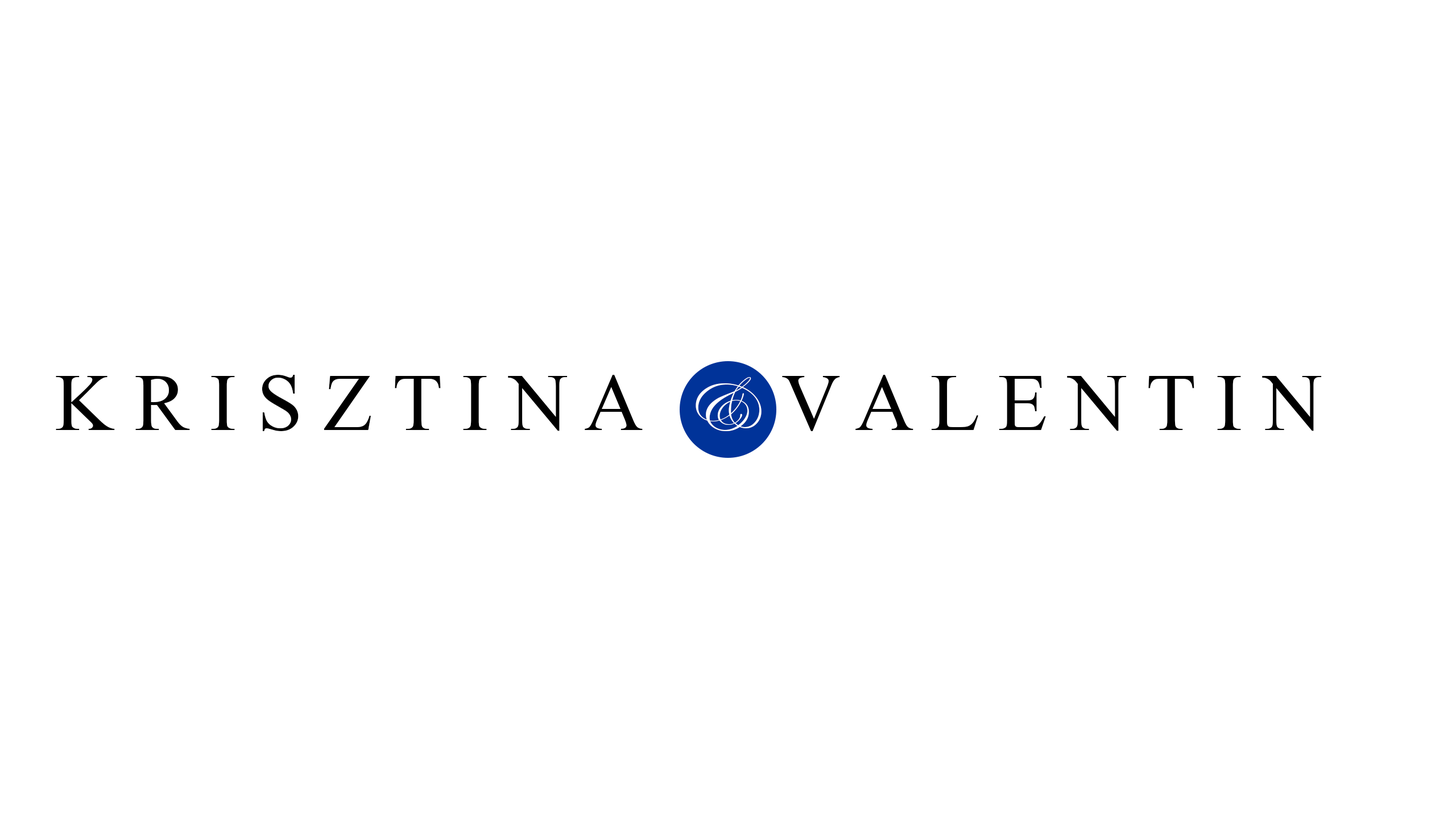
<style>
.page{position:relative;width:1456px;height:819px;background:#ffffff}
.page>*{position:absolute;margin:0}
.t1{font:81.9px "TimesNewRomanPSMT";color:#000000}
.t2{font:81.9px "EdwardianScriptITC";color:#ffffff}
</style>
<div class="page">
<p class="t1" style="left:56px;top:375px;width:1266px;height:56px">K R I S Z T I N A  <span class="t2">&amp;  </span>V A L E N T I N</p>
</div>
